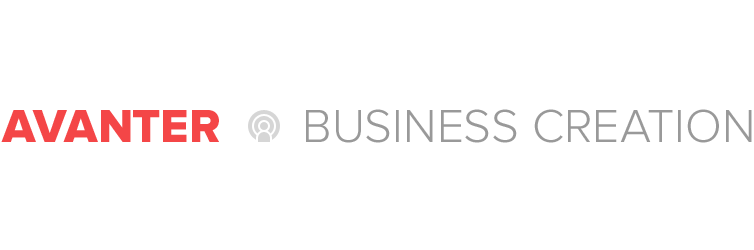
<style>
.page{position:relative;width:754px;height:250px;background:#ffffff}
.page>*{position:absolute;margin:0}
.t1{font:48px "ProximaNova-Extrabld";color:#f44647;text-transform:uppercase}
.t2{font:48px "ProximaNova-Light";color:#999999;text-transform:uppercase}
</style>
<div class="page">
<p class="t1" style="left:1px;top:110px;width:218px;height:32px">avanter</p>
<p class="t2" style="left:306px;top:109px;width:446px;height:34px">business creation</p>
</div>
